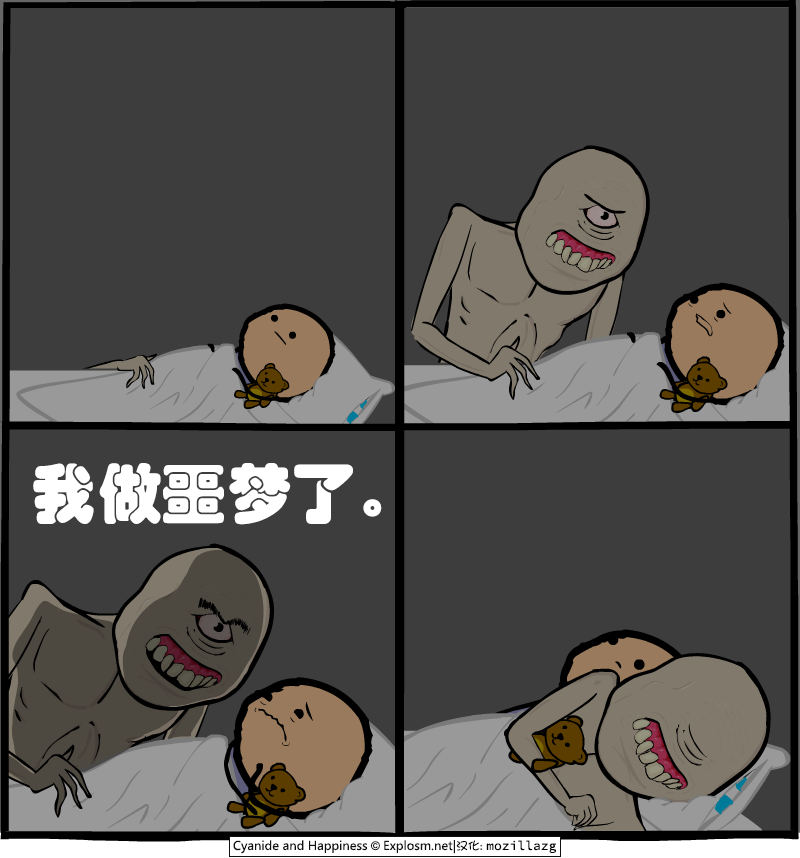
<style>
.page{position:relative;width:800px;height:858px;background:#3d3d3d}
.page>*{position:absolute;margin:0}
.t1{font:65px "STHupo";color:#ffffff}
</style>
<div class="page">
<p class="t1" style="left:33px;top:463px;width:349px;height:62px">我做噩梦了。</p>
</div>
